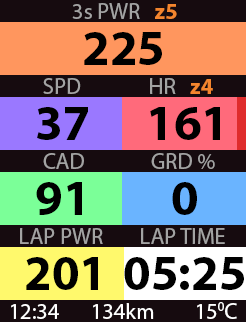
<style>
.page{position:relative;width:246px;height:322px;background:#160b0f}
.page>*{position:absolute;margin:0}
.t1{font:22.5px "MyriadPro-Regular";color:#a3a3a3}
.t2{font:22.5px "MyriadPro-Bold";color:#f3852e}
.t3{font:50px "MyriadPro-Bold";color:#000000}
.t4{font:22.5px "MyriadPro-Regular";color:#ffffff}
</style>
<div class="page">
<p class="t1" style="left:72px;top:3px;width:105px;height:16px">3s PWR   <span class="t2">z5</span></p>
<p class="t3" style="left:84px;top:32px;width:78px;height:33px">225</p>
<p class="t1" style="left:43px;top:78px;width:38px;height:16px">SPD</p>
<p class="t1" style="left:150px;top:78px;width:63px;height:16px">HR   <span class="t2">z4</span></p>
<p class="t3" style="left:37px;top:107px;width:51px;height:33px">37</p>
<p class="t3" style="left:150px;top:107px;width:70px;height:33px">161</p>
<p class="t1" style="left:43px;top:153px;width:41px;height:16px">CAD</p>
<p class="t1" style="left:151px;top:153px;width:64px;height:16px">GRD %</p>
<p class="t3" style="left:36px;top:182px;width:46px;height:33px">91</p>
<p class="t3" style="left:172px;top:182px;width:25px;height:33px">0</p>
<p class="t1" style="left:20px;top:228px;width:83px;height:16px">LAP PWR</p>
<p class="t1" style="left:141px;top:228px;width:84px;height:16px">LAP TIME</p>
<p class="t3" style="left:26px;top:257px;width:72px;height:33px">201</p>
<p class="t3" style="left:124px;top:257px;width:120px;height:33px">05:25</p>
<p class="t4" style="left:11px;top:304px;width:48px;height:15px">12:34</p>
<p class="t4" style="left:93px;top:303px;width:61px;height:16px">134km</p>
<p class="t4" style="left:197px;top:302px;width:40px;height:17px">150C</p>
</div>
